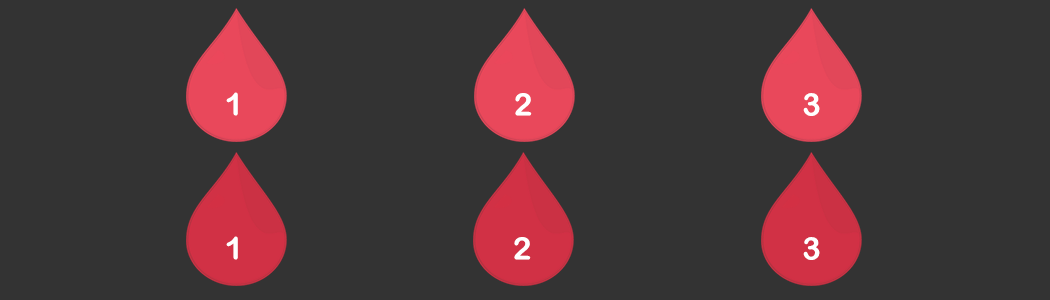
<style>
.page{position:relative;width:1050px;height:300px;background:#333333}
.page>*{position:absolute;margin:0}
.t1{font:31px "ArialRoundedMTBold";color:#ffffff}
</style>
<div class="page">
<p class="t1" style="left:226px;top:92px;width:12px;height:24px">1</p>
<p class="t1" style="left:515px;top:93px;width:17px;height:23px">2</p>
<p class="t1" style="left:803px;top:93px;width:17px;height:23px">3</p>
<p class="t1" style="left:226px;top:236px;width:12px;height:24px">1</p>
<p class="t1" style="left:514px;top:237px;width:17px;height:23px">2</p>
<p class="t1" style="left:803px;top:237px;width:17px;height:23px">3</p>
</div>
